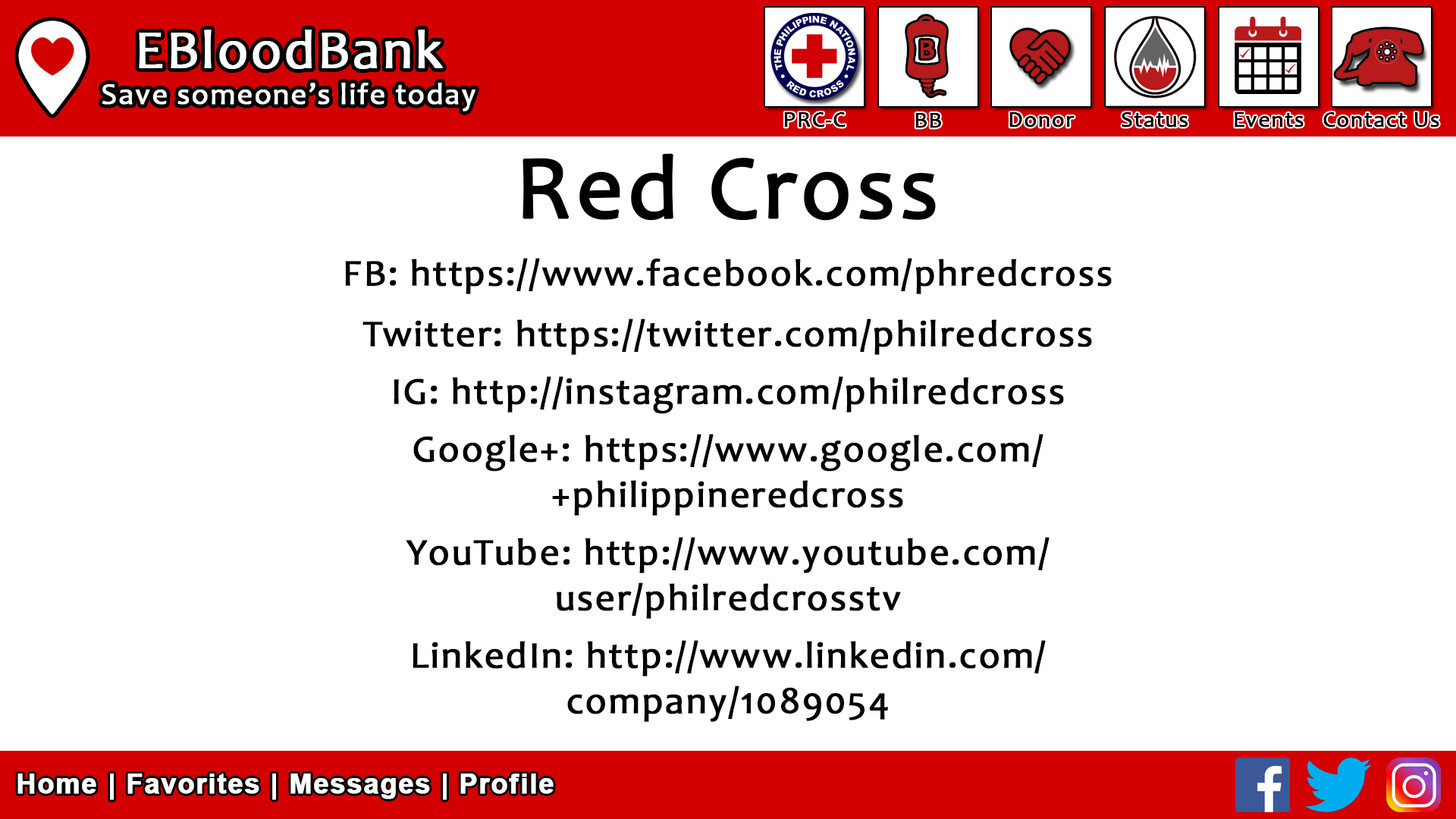
<style>
.page{position:relative;width:1456px;height:819px;background:#ffffff}
.page>*{position:absolute;margin:0}
.t1{font:30.3px "Candara";letter-spacing:0.03em;color:#ffffff;font-weight:bold}
.t2{font:54.6px "Candara";letter-spacing:0.03em;color:#ffffff;font-weight:bold}
.t3{font:22.7px "Candara";letter-spacing:0.03em;color:#000000;font-weight:bold}
.t4{font:91px "Candara";letter-spacing:0.03em;color:#000000;font-weight:bold}
.t5{font:37.9px "Candara";letter-spacing:0.03em;color:#000000;font-weight:bold}
.t6{font:27.3px "Arial-BoldMT";letter-spacing:0.03em;color:#ffffff;font-weight:bold}
</style>
<div class="page">
<p class="t1" style="left:102px;top:30px;width:373px;height:81px;text-align:center"><span class="t2">EBloodBank<br></span>Save someone’s life today</p>
<p class="t3" style="left:784px;top:112px;width:62px;height:15px">PRC-C</p>
<p class="t3" style="left:915px;top:113px;width:26px;height:15px">BB</p>
<p class="t3" style="left:1009px;top:112px;width:66px;height:15px">Donor</p>
<p class="t3" style="left:1122px;top:112px;width:66px;height:15px">Status</p>
<p class="t3" style="left:1235px;top:112px;width:69px;height:15px">Events</p>
<p class="t3" style="left:1323px;top:112px;width:116px;height:15px">Contact Us</p>
<p class="t4" style="left:522px;top:153px;width:414px;height:68px">Red Cross</p>
<p class="t5" style="left:345px;top:258px;width:767px;height:36px">FB: https://www.facebook.com/phredcross</p>
<p class="t5" style="left:362px;top:318px;width:730px;height:37px">Twitter: https://twitter.com/philredcross</p>
<p class="t5" style="left:394px;top:376px;width:670px;height:38px">IG: http://instagram.com/philredcross</p>
<p class="t5" style="left:413px;top:434px;width:630px;height:82px;text-align:center">Google+: https://www.google.com/<br>+philippineredcross</p>
<p class="t5" style="left:406px;top:537px;width:644px;height:82px;text-align:center">YouTube: http://www.youtube.com/<br>user/philredcrosstv</p>
<p class="t5" style="left:413px;top:640px;width:633px;height:82px;text-align:center">LinkedIn: http://www.linkedin.com/<br>company/1089054</p>
<p class="t6" style="left:17px;top:773px;width:537px;height:27px">Home | Favorites | Messages | Profile</p>
</div>
